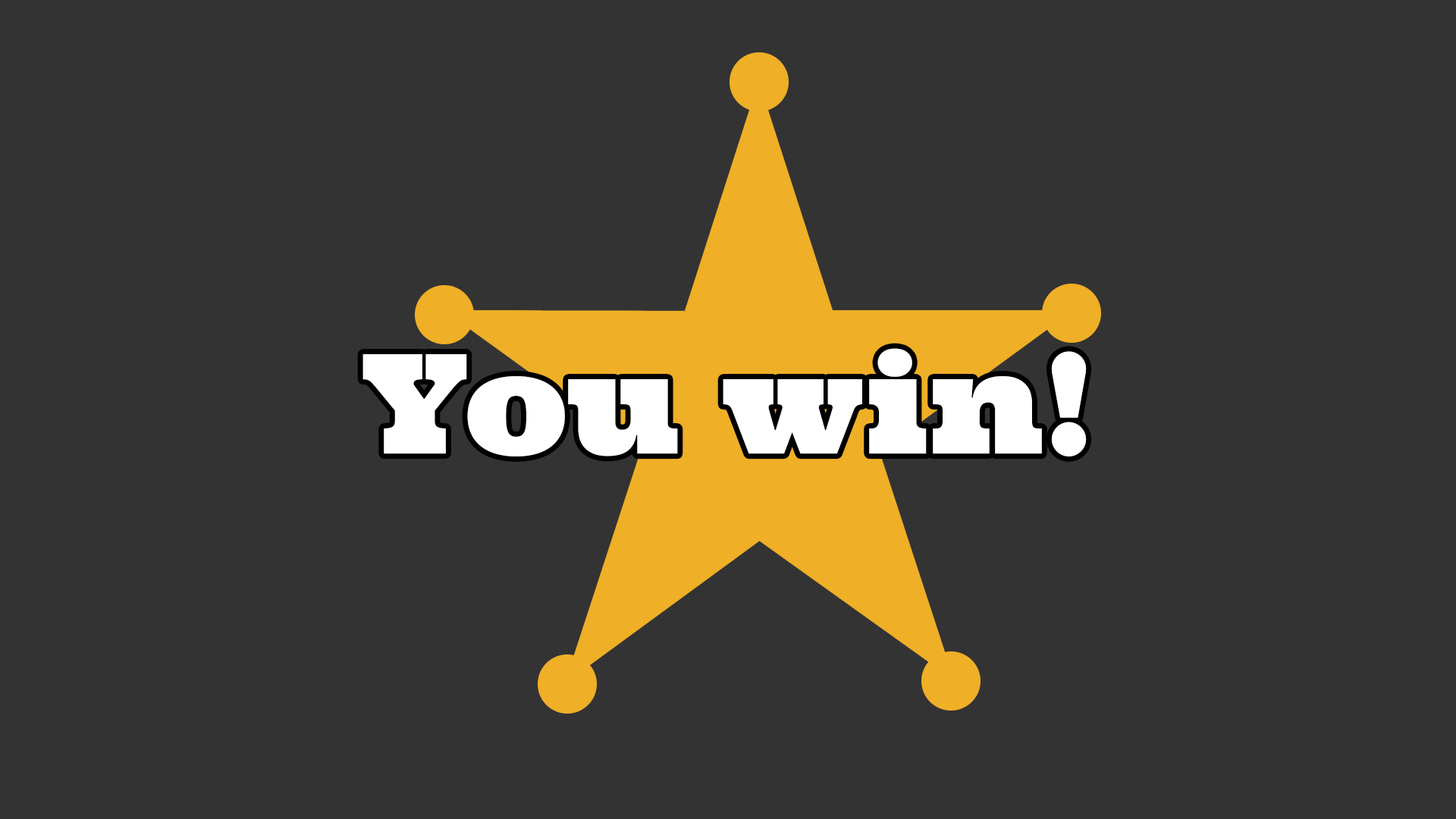
<style>
.page{position:relative;width:1456px;height:819px;background:#333333}
.page>*{position:absolute;margin:0}
.t1{font:138.2px "Ultra";color:#ffffff}
</style>
<div class="page">
<p class="t1" style="left:362px;top:348px;width:725px;height:109px">You win!</p>
</div>
